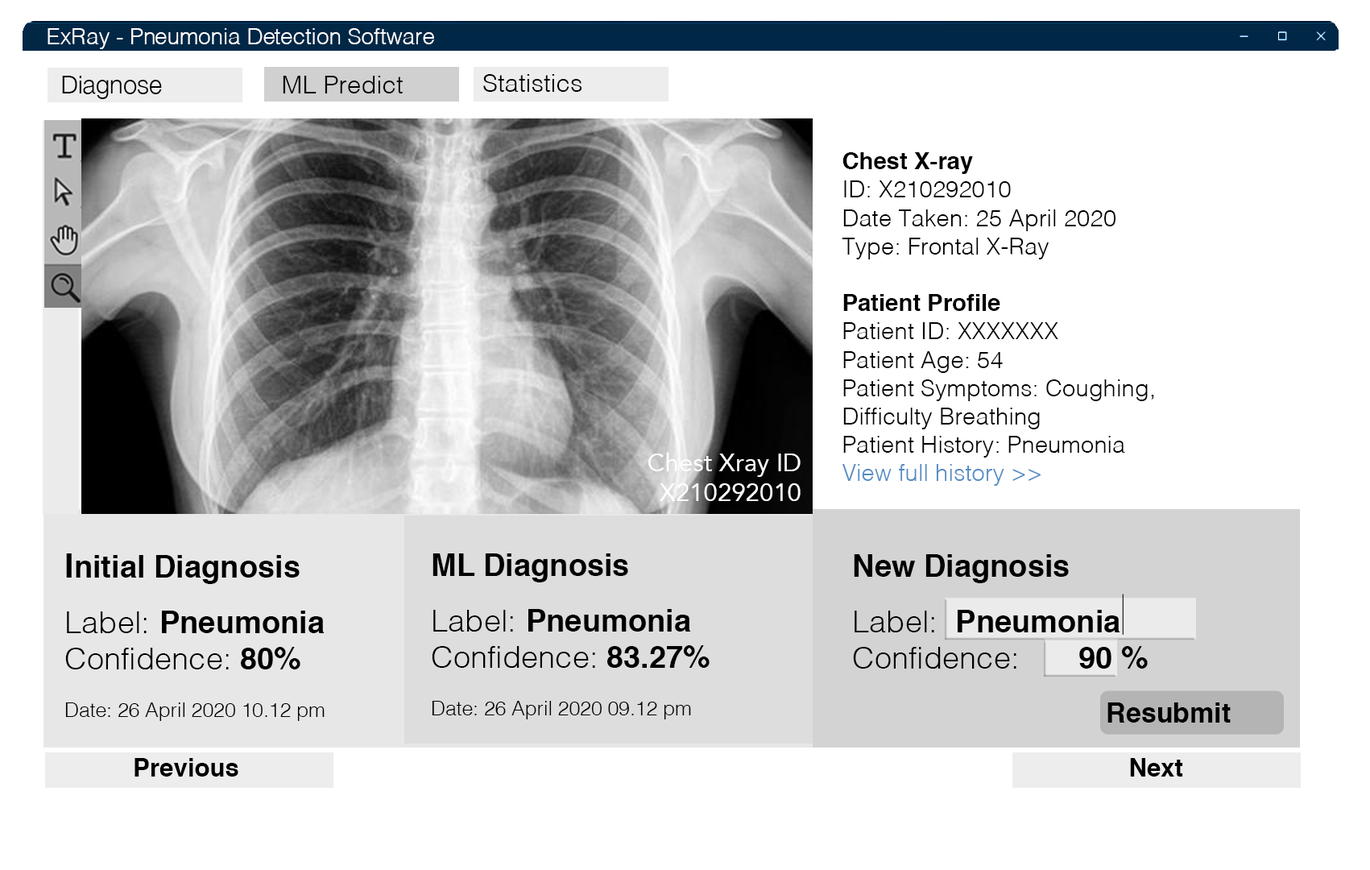
<style>
.page{position:relative;width:1370px;height:870px;background:#ffffff}
.page>*{position:absolute;margin:0}
.t1{font:22.4px "Helvetica-Light";color:#ffffff}
.t2{font:25.1px "HelveticaNeue-Light";color:#000000}
.t3{font:25.1px "Helvetica-Light";color:#000000}
.t4{font:23.6px "Helvetica-Light";color:#000000}
.t5{font:23.6px "Helvetica-Bold";color:#000000}
.t6{font:23.6px "Helvetica-Light";color:#558cc5}
.t7{font:25.1px "Avenir-Roman";color:#ffffff}
.t8{font:19.9px "Helvetica-Light";color:#000000}
.t9{font:33.5px "Helvetica-Bold";color:#000000}
.t10{font:30.6px "Helvetica-Bold";color:#000000}
.t11{font:30.6px "Helvetica-Light";color:#000000}
.t12{font:27.3px "Helvetica-Bold";color:#000000}
.t13{font:25.1px "Helvetica-Bold";color:#000000}
</style>
<div class="page">
<p class="t1" style="left:48px;top:28px;width:386px;height:21px">ExRay - Pneumonia Detection Software</p>
<p class="t2" style="left:62px;top:76px;width:100px;height:23px">Diagnose</p>
<p class="t3" style="left:283px;top:76px;width:120px;height:17px">ML Predict</p>
<p class="t3" style="left:483px;top:74px;width:99px;height:18px">Statistics</p>
<p class="t4" style="left:842px;top:152px;width:313px;height:334px"><span class="t5">Chest X-ray<br></span>ID: X210292010<br>Date Taken: 25 April 2020<br>Type: Frontal X-Ray<br><br><span class="t5">Patient Profile<br></span>Patient ID: XXXXXXX<br>Patient Age: 54<br>Patient Symptoms: Coughing, <br>Difficulty Breathing<br>Patient History: Pneumonia<br><span class="t6">View full history &gt;&gt;</span></p>
<p class="t7" style="left:648px;top:452px;width:153px;height:49px;text-align:right">Chest Xray ID<br>X210292010</p>
<p class="t8" style="left:65px;top:553px;width:260px;height:168px"><span class="t9">I</span><span class="t10">nitial Diagnosis<br><br></span><span class="t11">Label: </span><span class="t10">Pneumonia<br></span><span class="t11">Confidence: </span><span class="t10">80%<br></span><br>Date: 26 April 2020 10.12 pm</p>
<p class="t8" style="left:432px;top:553px;width:278px;height:166px"><span class="t10">ML Diagnosis<br><br></span><span class="t11">Label: </span><span class="t10">Pneumonia<br></span><span class="t11">Confidence: </span><span class="t10">83.27%<br></span><br>Date: 26 April 2020 09.12 pm</p>
<p class="t10" style="left:853px;top:554px;width:295px;height:115px">New Diagnosis<br><br><span class="t11">Label:  </span>Pneumonia<br><span class="t11">Confidence:       </span>90 %</p>
<p class="t12" style="left:1108px;top:703px;width:123px;height:20px">Resubmit</p>
<p class="t13" style="left:135px;top:758px;width:103px;height:19px">Previous</p>
<p class="t13" style="left:1130px;top:758px;width:54px;height:19px">Next</p>
</div>
